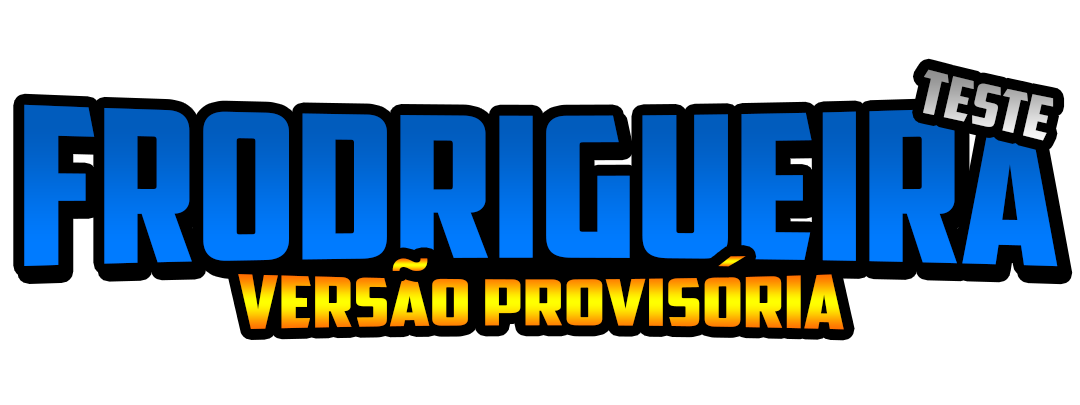
<style>
.page{position:relative;width:1080px;height:405px;background:#ffffff}
.page>*{position:absolute;margin:0}
.t1{font:60.6px "AmericanCaptain";scale:1.23 1}
.t2{font:225.2px "AmericanCaptain"}
.t3{font:76.9px "AmericanCaptain";scale:1.23 1}
</style>
<div class="page">
<p class="t1" style="left:923px;top:69px;width:131px;height:72px;rotate:13deg">teste</p>
<p class="t2" style="left:24px;top:104px;width:1034px;height:163px">FRODRIGUEIRA</p>
<p class="t3" style="left:718px;top:256px;width:28px;height:11px">´</p>
<p class="t3" style="left:392px;top:258px;width:36px;height:13px">~</p>
<p class="t3" style="left:238px;top:274px;width:606px;height:56px">versao provisoria</p>
</div>
